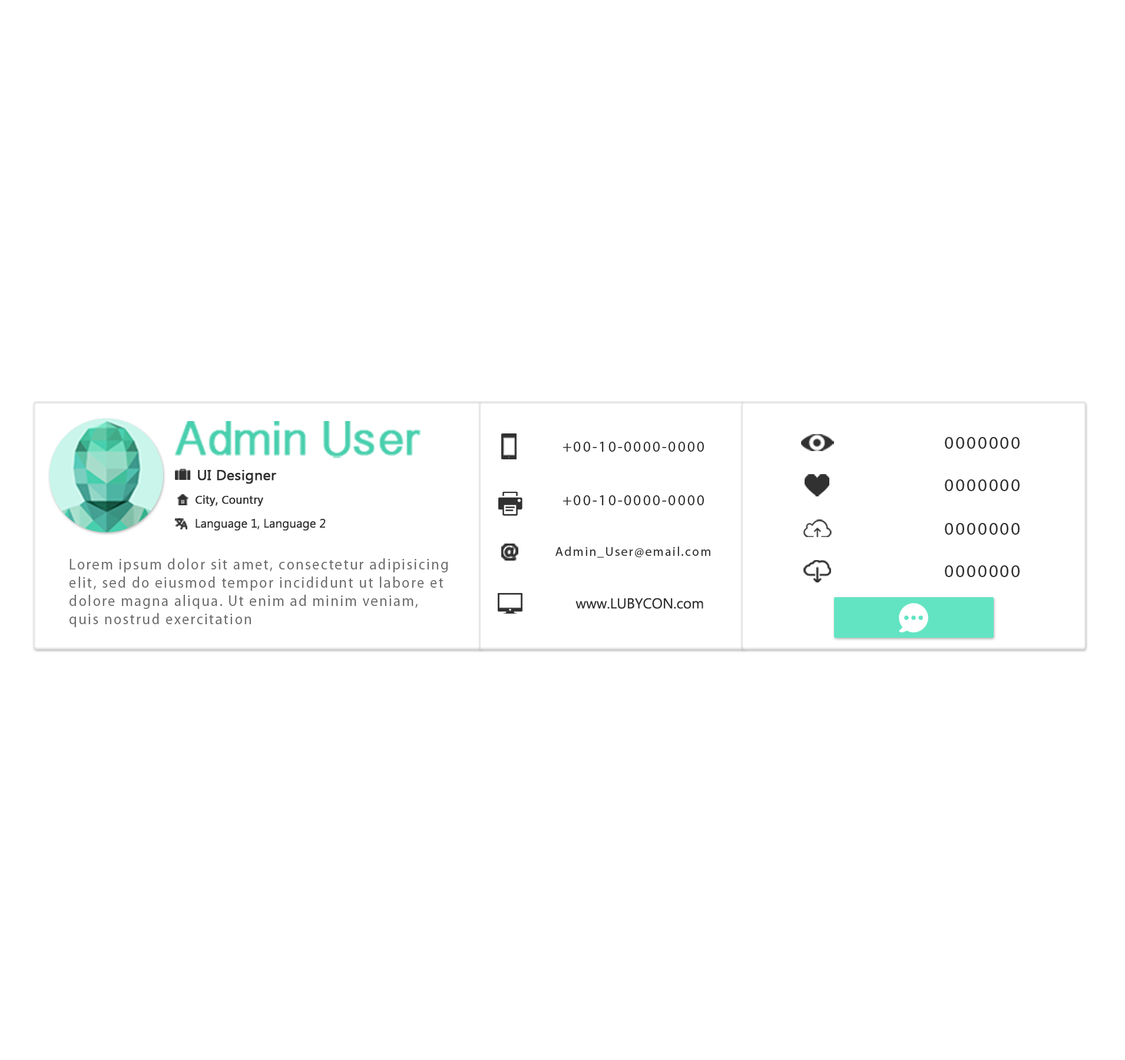
<style>
.page{position:relative;width:1125px;height:1060px;background:#ffffff}
.page>*{position:absolute;margin:0}
.t1{font:48.3px "TamilSangamMN";color:#48cfad;font-weight:bold}
.t2{font:18px "MyriadPro-Regular";letter-spacing:0.1em;color:#313131}
.t3{font:15.5px "MyriadPro-Regular";letter-spacing:0.1em;color:#313131}
.t4{font:14.4px "LaoUI";color:#313131;font-weight:bold}
.t5{font:11.3px "LaoUI";color:#313131;font-weight:bold}
.t6{font:12.2px "LaoUI";color:#313131}
.t7{font:12.9px "MyriadPro-Regular";letter-spacing:0.1em;color:#313131}
.t8{font:15.2px "MyriadPro-Regular";letter-spacing:0.1em;color:#6e6e6e;scale:0.94 1}
.t9{font:14.4px "LaoUI";color:#313131}
</style>
<div class="page">
<p class="t1" style="left:175px;top:421px;width:245px;height:37px">Admin User</p>
<p class="t2" style="left:945px;top:437px;width:74px;height:12px">0000000</p>
<p class="t3" style="left:563px;top:442px;width:141px;height:10px">+00-10-0000-0000</p>
<p class="t4" style="left:198px;top:470px;width:78px;height:14px">UI Designer</p>
<p class="t2" style="left:945px;top:479px;width:74px;height:12px">0000000</p>
<p class="t5" style="left:196px;top:495px;width:67px;height:11px">City, Country</p>
<p class="t3" style="left:563px;top:495px;width:141px;height:10px">+00-10-0000-0000</p>
<p class="t6" style="left:196px;top:519px;width:130px;height:12px">Language 1, Language 2</p>
<p class="t2" style="left:945px;top:523px;width:74px;height:12px">0000000</p>
<p class="t7" style="left:555px;top:547px;width:155px;height:11px">Admin_User@email.com</p>
<p class="t8" style="left:69px;top:558px;width:379px;height:69px">Lorem ipsum dolor sit amet, consectetur adipisicing <br>elit, sed do eiusmod tempor incididunt ut labore et <br>dolore magna aliqua. Ut enim ad minim veniam, <br>quis nostrud exercitation</p>
<p class="t2" style="left:945px;top:565px;width:74px;height:12px">0000000</p>
<p class="t9" style="left:575px;top:598px;width:128px;height:11px">www.LUBYCON.com</p>
</div>
